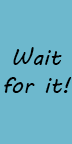
<style>
.page{position:relative;width:72px;height:144px;background:#6db8cd}
.page>*{position:absolute;margin:0}
.t1{font:23px "MVBoli";color:#000000}
</style>
<div class="page">
<p class="t1" style="left:4px;top:47px;width:68px;height:46px;text-align:center">Wait for it!</p>
</div>
